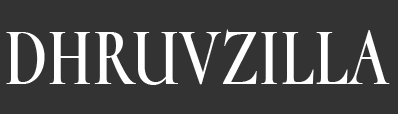
<style>
.page{position:relative;width:398px;height:114px;background:#333333}
.page>*{position:absolute;margin:0}
.t1{font:83.2px "CormorantUpright-Bold";letter-spacing:0.001em;color:#ffffff;scale:0.75 1}
</style>
<div class="page">
<p class="t1" style="left:6px;top:29px;width:384px;height:56px">DHRUVZILLA</p>
</div>
